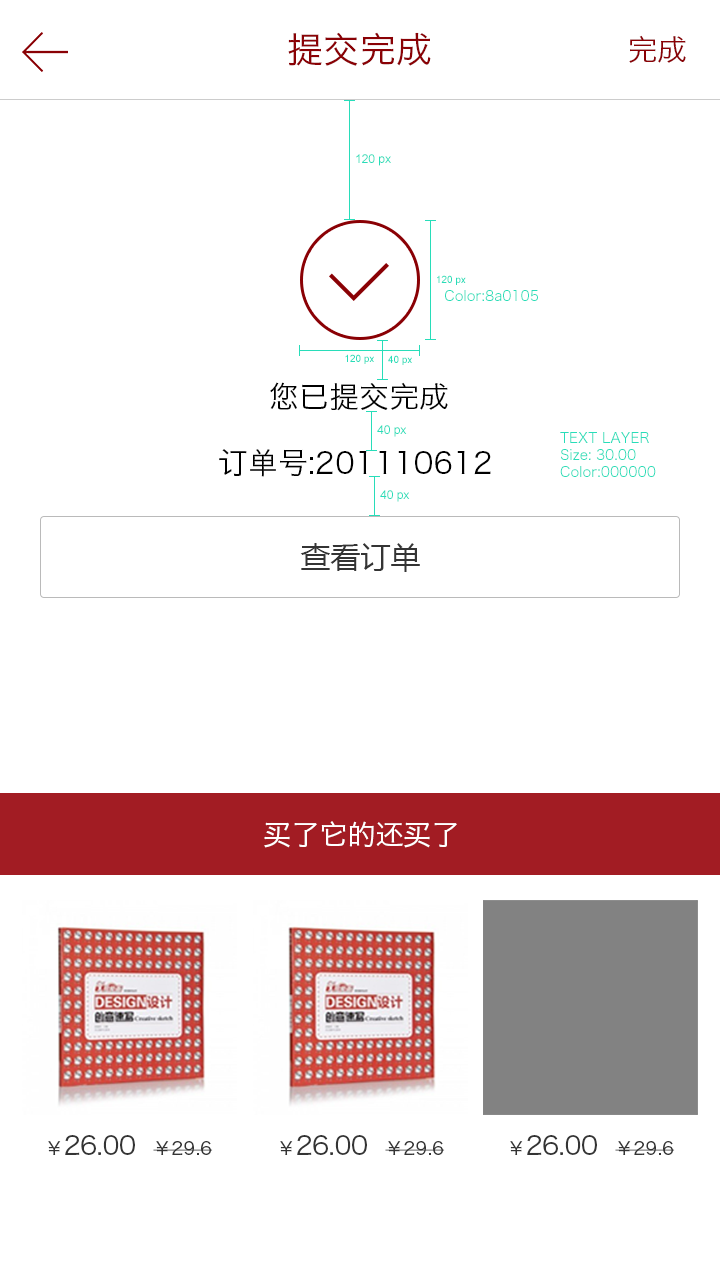
<style>
.page{position:relative;width:720px;height:1280px;background:#ffffff}
.page>*{position:absolute;margin:0}
.t1{font:36px "HiraginoSansGB-W3";color:#8a0105}
.t2{font:30px "HiraginoSansGB-W3";color:#8a0105}
.t3{font:12px "ArialMT";color:#28ddb9}
.t4{font:10px "ArialMT";color:#28ddb9}
.t5{font:14px "HiraginoSansGB-W3";color:#28ddb9}
.t6{font:30px "HiraginoSansGB-W3";color:#000000}
.t7{font:30px "MicrosoftYaHei";color:#343434}
.t8{font:28px "HiraginoSansGB-W3";color:#ffffff}
.t9{font:26px "HiraginoSansGB-W3";color:#343434}
.t10{font:18px "HiraginoSansGB-W3";color:#343434}
</style>
<div class="page">
<p class="t1" style="left:288px;top:32px;width:143px;height:34px">提交完成</p>
<p class="t2" style="left:629px;top:35px;width:57px;height:28px">完成</p>
<p class="t3" style="left:356px;top:154px;width:35px;height:12px">120 px</p>
<p class="t4" style="left:437px;top:275px;width:29px;height:10px">120 px</p>
<p class="t5" style="left:445px;top:290px;width:93px;height:11px">Color:8a0105</p>
<p class="t4" style="left:345px;top:354px;width:29px;height:10px">120 px</p>
<p class="t4" style="left:388px;top:355px;width:24px;height:10px">40 px</p>
<p class="t6" style="left:270px;top:382px;width:178px;height:29px">您已提交完成</p>
<p class="t3" style="left:377px;top:425px;width:30px;height:12px">40 px</p>
<p class="t5" style="left:560px;top:432px;width:96px;height:45px">TEXT LAYER<br>Size: 30.00<br>Color:000000</p>
<p class="t6" style="left:219px;top:449px;width:272px;height:28px">订单号:201110612</p>
<p class="t3" style="left:380px;top:490px;width:30px;height:12px">40 px</p>
<p class="t7" style="left:300px;top:543px;width:120px;height:29px">查看订单</p>
<p class="t8" style="left:264px;top:821px;width:193px;height:27px">买了它的还买了</p>
<p class="t9" style="left:48px;top:1135px;width:165px;height:20px"><span class="t10">￥</span>26.00  <span class="t10">￥29.6</span></p>
<p class="t9" style="left:280px;top:1135px;width:165px;height:20px"><span class="t10">￥</span>26.00  <span class="t10">￥29.6</span></p>
<p class="t9" style="left:510px;top:1135px;width:165px;height:20px"><span class="t10">￥</span>26.00  <span class="t10">￥29.6</span></p>
</div>
